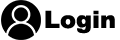
<style>
.page{position:relative;width:120px;height:40px;background:#ffffff}
.page>*{position:absolute;margin:0}
.t1{font:24px "Arial-Black";color:#000000}
</style>
<div class="page">
<p class="t1" style="left:45px;top:10px;width:70px;height:24px">Login</p>
</div>
